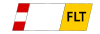
<style>
.page{position:relative;width:100px;height:34px;background:#ffffff}
.page>*{position:absolute;margin:0}
.t1{font:14px "MyriadPro-Semibold";color:#000000}
</style>
<div class="page">
<p class="t1" style="left:67px;top:11px;width:20px;height:11px">FLT</p>
</div>
